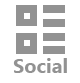
<style>
.page{position:relative;width:80px;height:83px;background:#ffffff}
.page>*{position:absolute;margin:0}
.t1{font:20px "SegoeUI-Bold";color:#929292}
</style>
<div class="page">
<p class="t1" style="left:13px;top:58px;width:54px;height:15px">Social</p>
</div>
